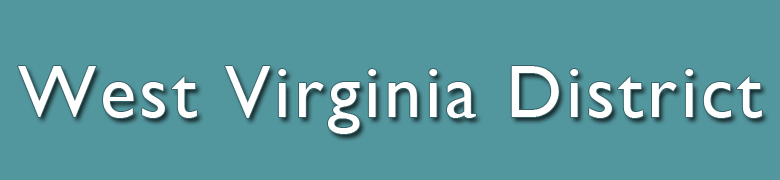
<style>
.page{position:relative;width:780px;height:180px;background:#52969e}
.page>*{position:absolute;margin:0}
.t1{font:75px "GillSansMT";letter-spacing:0.05em;color:#ffffff}
</style>
<div class="page">
<p class="t1" style="left:18px;top:66px;width:744px;height:68px">West Virginia District</p>
</div>
